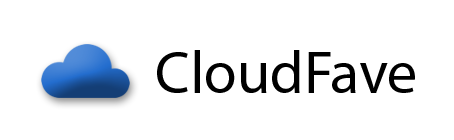
<style>
.page{position:relative;width:454px;height:140px;background:#ffffff}
.page>*{position:absolute;margin:0}
.t1{font:60px "MyriadPro-Regular";color:#000000}
</style>
<div class="page">
<p class="t1" style="left:157px;top:50px;width:258px;height:43px">CloudFave</p>
</div>
